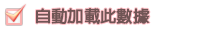
<style>
.page{position:relative;width:218px;height:30px;background:#ffffff}
.page>*{position:absolute;margin:0}
.t1{font:16px "AdobeFanHeitiStd-Bold";color:#705555;font-weight:bold}
</style>
<div class="page">
<p class="t1" style="left:36px;top:8px;width:114px;height:17px">自動加載此數據</p>
</div>
